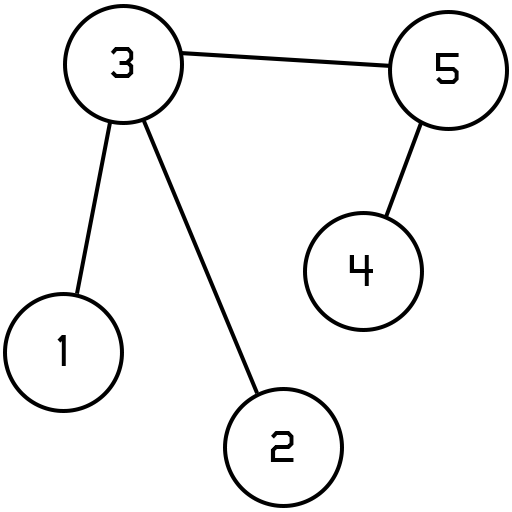
<style>
.page{position:relative;width:512px;height:512px;background:#ffffff}
.page>*{position:absolute;margin:0}
.t1{font:38.1px "Tapeworm";color:#000000}
</style>
<div class="page">
<p class="t1" style="left:110px;top:47px;width:24px;height:31px">3</p>
<p class="t1" style="left:436px;top:53px;width:23px;height:31px">5</p>
<p class="t1" style="left:349px;top:255px;width:24px;height:31px">4</p>
<p class="t1" style="left:57px;top:335px;width:9px;height:31px">1</p>
<p class="t1" style="left:270px;top:431px;width:24px;height:31px">2</p>
</div>
